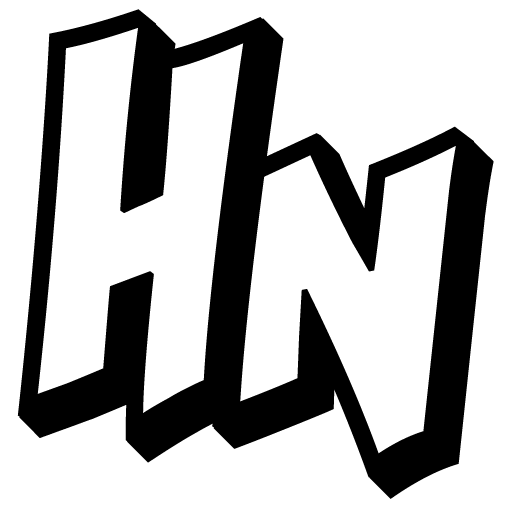
<style>
.page{position:relative;width:512px;height:512px;background:#ffffff}
.page>*{position:absolute;margin:0}
.t1{font:200px "Kraash";color:#000000;font-weight:bold}
</style>
<div class="page">
<p class="t1" style="left:17px;top:9px;width:267px;height:454px">H</p>
<p class="t1" style="left:212px;top:126px;width:282px;height:373px">N</p>
</div>
